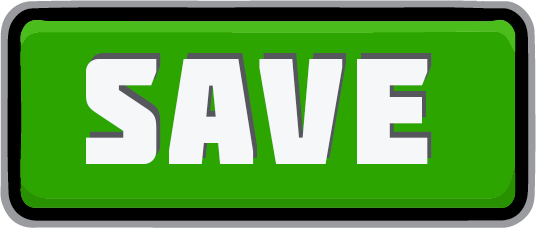
<style>
.page{position:relative;width:536px;height:228px;background:#2da500}
.page>*{position:absolute;margin:0}
.t1{font:150px "Molot";letter-spacing:0.05em;color:#f6f7f8}
</style>
<div class="page">
<p class="t1" style="left:90px;top:53px;width:342px;height:105px">save</p>
<p class="t1" style="left:86px;top:59px;width:342px;height:105px">save</p>
</div>
